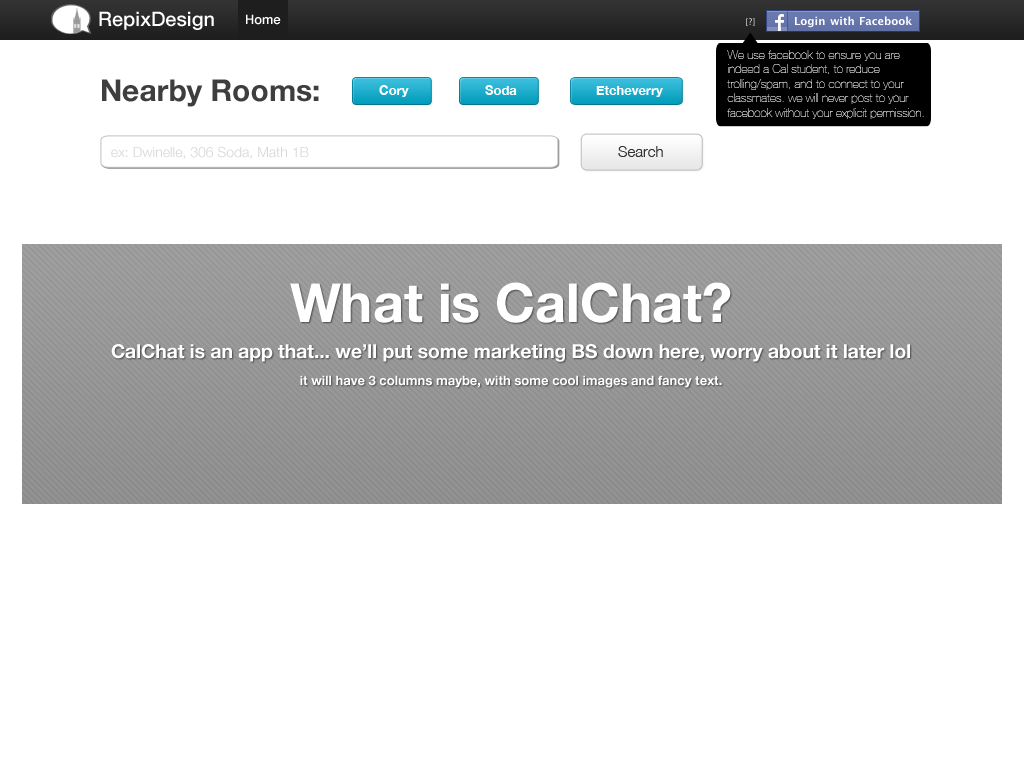
<style>
.page{position:relative;width:1024px;height:768px;background:#ffffff}
.page>*{position:absolute;margin:0}
.t1{font:20px "HelveticaNeue-Medium";color:#ffffff}
.t2{font:13px "HelveticaNeue-Medium";color:#ffffff}
.t3{font:10px "MyriadPro-Regular";color:#d3d3d3}
.t4{font:12px "HelveticaNeue-UltraLight";color:#d6d6d6}
.t5{font:30px "HelveticaNeue-Bold";color:#3e3e3e}
.t6{font:13px "HelveticaNeue-Bold";color:#ffffff}
.t7{font:14px "HelveticaNeue-Light";color:#cdcdcd}
.t8{font:15px "HelveticaNeue-Light";color:#303030}
.t9{font:19.2px/36px "HelveticaNeue-Bold";color:#ffffff}
.t10{font:54px/36px "HelveticaNeue-Bold";color:#ffffff}
.t11{font:13px/27px "HelveticaNeue-Bold";color:#ffffff}
</style>
<div class="page">
<p class="t1" style="left:99px;top:11px;width:115px;height:19px">RepixDesign</p>
<p class="t2" style="left:246px;top:14px;width:35px;height:11px">Home</p>
<p class="t3" style="left:746px;top:18px;width:9px;height:8px">[?]</p>
<p class="t4" style="left:727px;top:50px;width:197px;height:69px">We use facebook to ensure you are indeed a Cal student, to reduce trolling/spam, and to connect to your classmates. we will never post to your facebook without your explicit permission.</p>
<p class="t5" style="left:102px;top:79px;width:217px;height:28px">Nearby Rooms:</p>
<p class="t6" style="left:379px;top:85px;width:30px;height:12px">Cory</p>
<p class="t6" style="left:485px;top:85px;width:32px;height:10px">Soda</p>
<p class="t6" style="left:596px;top:86px;width:67px;height:11px">Etcheverry</p>
<p class="t7" style="left:111px;top:146px;width:198px;height:13px;opacity:0.8">ex: Dwinelle, 306 Soda, Math 1B</p>
<p class="t8" style="left:618px;top:146px;width:45px;height:11px">Search</p>
<p class="t9" style="left:111px;top:282px;width:799px;height:106px;text-align:center"><span class="t10">What is CalChat?<br></span>CalChat is an app that... we’ll put some marketing BS down here, worry about it later lol<br><span class="t11">it will have 3 columns maybe, with some cool images and fancy text.</span></p>
</div>
